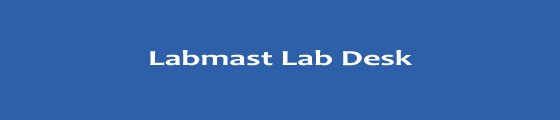
<style>
.page{position:relative;width:560px;height:120px;background:#2e5fa9}
.page>*{position:absolute;margin:0}
.t1{font:21.5px "Candara-Bold";color:#ffffff;scale:1.6 1}
</style>
<div class="page">
<p class="t1" style="left:150px;top:50px;width:262px;height:16px">Labmast Lab Desk</p>
</div>
